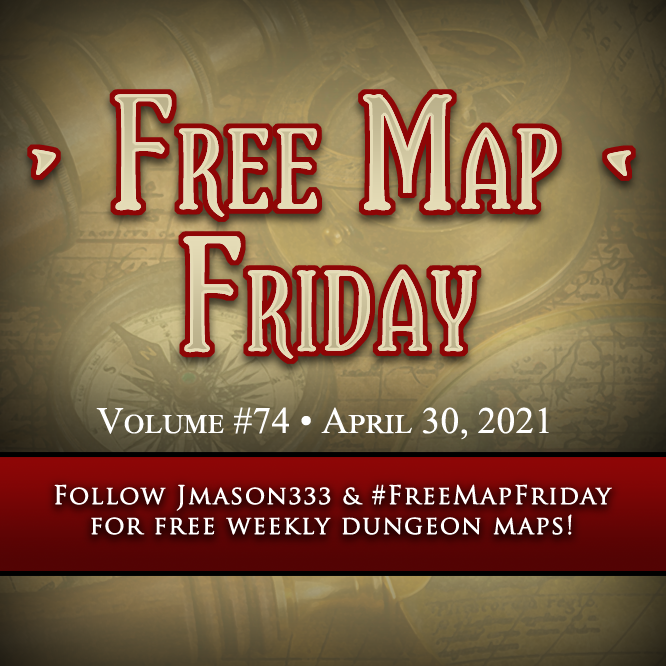
<style>
.page{position:relative;width:666px;height:666px}
.page>*{position:absolute;margin:0}
.t1{font:37.5px "TimesNewRomanPSMT";color:#ffffff;font-variant:small-caps}
.t2{font:25px "TrajanPro-Regular";letter-spacing:0.033em;color:#ffffff;font-variant:small-caps;font-weight:bold}
</style>
<div class="page">
<p class="t1" style="left:96px;top:407px;width:453px;height:33px">Volume #74 • April 30, 2021</p>
<p class="t2" style="left:54px;top:484px;width:558px;height:51px;text-align:center">Follow Jmason333 &amp; #FreeMapFriday<br>for free weekly dungeon maps!</p>
</div>
